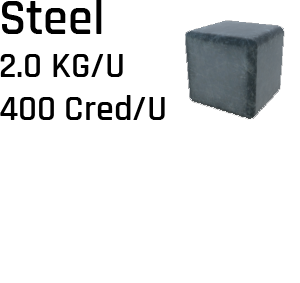
<style>
.page{position:relative;width:300px;height:283px;background:#ffffff}
.page>*{position:absolute;margin:0}
.t1{font:36px "Rajdhani-SemiBold";color:#000000}
.t2{font:50px "Rajdhani-SemiBold";color:#000000}
</style>
<div class="page">
<p class="t1" style="left:0px;top:0px;width:165px;height:120px"><span class="t2">Steel<br></span>2.0 KG/U<br>400 Cred/U</p>
</div>
